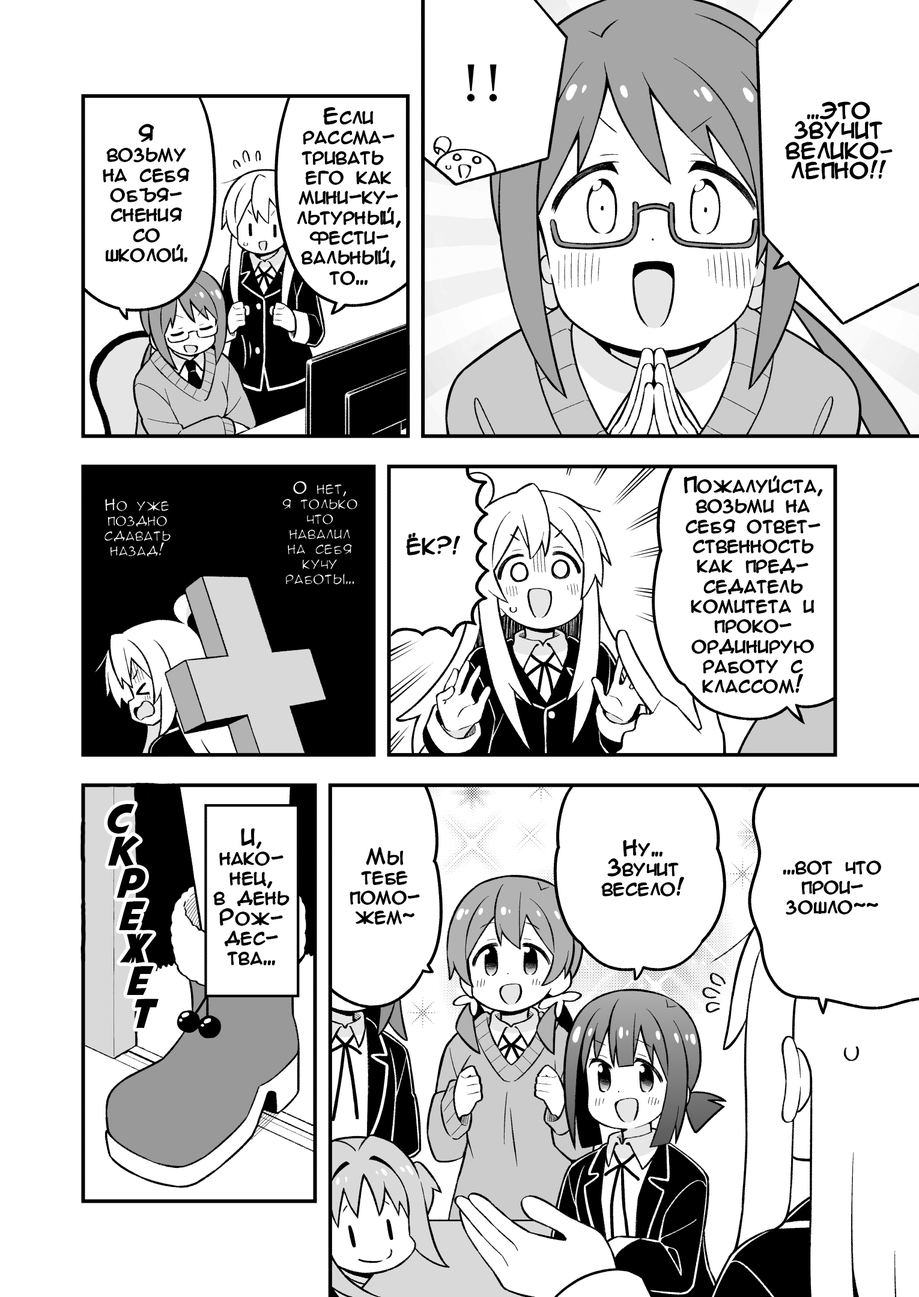
<style>
.page{position:relative;width:919px;height:1297px;background:#ffffff}
.page>*{position:absolute;margin:0}
.t1{font:20px/20px "AnimeAcev3";color:#000000}
.t2{font:15px/15px "AnimeAcev3"}
.t3{font:20px "AnimeAcev3";color:#000000}
.t4{font:40px/32.5px "AvengeanceMArusbyaLiNcE";color:#000000}
</style>
<div class="page">
<p class="t1" style="left:297px;top:108px;width:104px;height:177px;text-align:center">Если<br>рассма-<br>тривать <br>его как<br>мини-ку-<br>льтурный,<br>фести-<br>вальный,<br>то...</p>
<p class="t1" style="left:786px;top:102px;width:106px;height:77px;text-align:center">...ЭТО<br>ЗВУЧИТ<br>ВЕЛИКО-<br>ЛЕПНО!!</p>
<p class="t1" style="left:103px;top:124px;width:86px;height:138px;text-align:center">Я<br>возьму<br>на себя<br>объя-<br>снения<br>со<br>школой.</p>
<p class="t2" style="left:282px;top:481px;width:76px;height:104px;text-align:center">О нет,<br>я только<br>что<br>навалил<br>на себя<br>кучу<br>работы...</p>
<p class="t1" style="left:684px;top:476px;width:138px;height:218px;text-align:center">Пожалуйста,<br>возьми на<br>себя ответ-<br>ственность<br>как пред-<br>седатель<br>комитета и<br>проко-<br>ординирую<br>работу с<br>классом!</p>
<p class="t2" style="left:104px;top:499px;width:67px;height:58px;text-align:center">Но уже<br>поздно<br>сдавать<br>назад!</p>
<p class="t3" style="left:407px;top:533px;width:53px;height:22px">ЁК?!</p>
<p class="t4" style="left:108px;top:804px;width:51px;height:225px;text-align:center">C<br> к<br>   р<br>   е<br>    ж<br>     е<br>      т</p>
<p class="t1" style="left:214px;top:829px;width:75px;height:136px;text-align:center">И,<br>нако-<br>нец,<br>в день<br>Рож-<br>дес-<br>тва...</p>
<p class="t1" style="left:602px;top:840px;width:82px;height:57px;text-align:center">Ну...<br>Звучит<br>весело!</p>
<p class="t1" style="left:350px;top:848px;width:69px;height:77px;text-align:center">Мы<br>тебе<br>помо-<br>жем~</p>
<p class="t1" style="left:783px;top:861px;width:98px;height:54px;text-align:center">...вот что<br>прои-<br>зошло~~</p>
</div>
